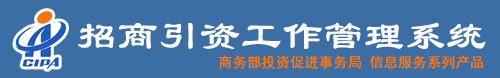
<style>
.page{position:relative;width:500px;height:78px;background:#3b6ea5}
.page>*{position:absolute;margin:0}
.t1{font:40px "LiSu";color:#ffffff;font-weight:bold}
.t2{font:14px "SimHei";color:#fd7413;font-weight:bold}
</style>
<div class="page">
<p class="t1" style="left:78px;top:22px;width:408px;height:27px">招商引资工作管理系统</p>
<p class="t2" style="left:219px;top:55px;width:264px;height:14px">商务部投资促进事务局 信息服务系列产品</p>
</div>
